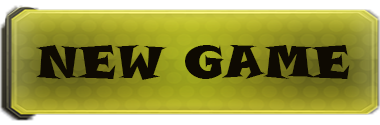
<style>
.page{position:relative;width:380px;height:125px}
.page>*{position:absolute;margin:0}
.t1{font:45.8px "SnapITC-Regular";color:#0e0a02}
</style>
<div class="page">
<p class="t1" style="left:36px;top:45px;width:314px;height:35px">NEW GAME</p>
</div>
